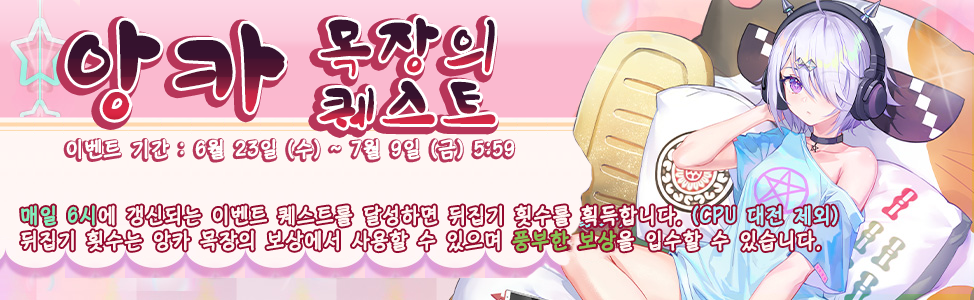
<style>
.page{position:relative;width:974px;height:300px}
.page>*{position:absolute;margin:0}
.t1{font:53.5px "HSGyoulnoonkot";letter-spacing:0.114em;font-weight:bold}
.t2{font:97.4px "HSGyoulnoonkot";letter-spacing:0.114em;color:#481330;font-weight:bold}
.t3{font:21px "KoreanCNM-L";letter-spacing:0.014em;color:#ffffff;font-weight:bold}
.t4{font:21px/25px "KoreanCNM-L";letter-spacing:0.014em;color:#fff6f4;font-weight:bold}
.t5{font:21px/25px "KoreanCNM-L";letter-spacing:0.014em;color:#84f0bf;font-weight:bold}
.t6{font:21px/25px "KoreanCNM-L";letter-spacing:0.014em;color:#b0f2ff;font-weight:bold}
.t7{font:21px/25px "KoreanCNM-L";letter-spacing:0.014em;color:#89c456;font-weight:bold}
</style>
<div class="page">
<p class="t1" style="left:320px;top:17px;width:175px;height:60px">목장의</p>
<p class="t2" style="left:67px;top:20px;width:218px;height:100px">앙카</p>
<p class="t1" style="left:319px;top:80px;width:177px;height:48px">퀘스트</p>
<p class="t3" style="left:66px;top:139px;width:449px;height:21px">이벤트 기간 : 6월 23일 (수) ~ 7월 9일 (금) 5:59</p>
<p class="t4" style="left:21px;top:205px;width:817px;height:47px"><span class="t5">매일 6시</span>에 갱신되는 이벤트 퀘스트를 달성하면 뒤집기 횟수를 획득합니다. <span class="t6">(CPU 대전 제외)<br></span>뒤집기 횟수는 앙카 목장의 보상에서 사용할 수 있으며 <span class="t7">풍부한 보상</span>을 입수할 수 있습니다.</p>
</div>
